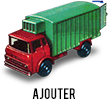
<style>
.page{position:relative;width:108px;height:108px;background:#ffffff}
.page>*{position:absolute;margin:0}
.t1{font:12px "Bebas";color:#000000}
</style>
<div class="page">
<p class="t1" style="left:32px;top:88px;width:43px;height:11px">Ajouter</p>
</div>
